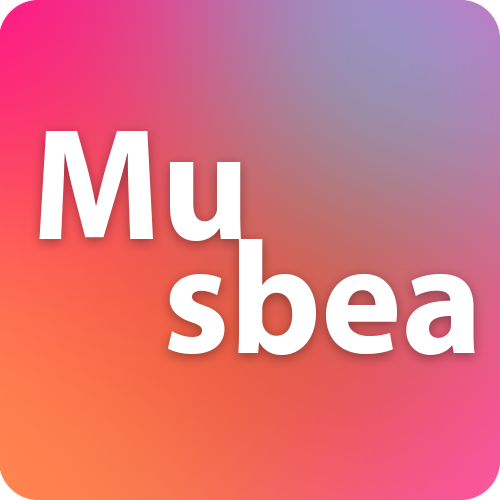
<style>
.page{position:relative;width:500px;height:500px}
.page>*{position:absolute;margin:0}
.t1{font:160px "MyriadPro-Bold";color:#ffffff;scale:0.95 1}
</style>
<div class="page">
<p class="t1" style="left:39px;top:131px;width:202px;height:111px">Mu</p>
<p class="t1" style="left:167px;top:239px;width:308px;height:117px">sbea</p>
</div>
